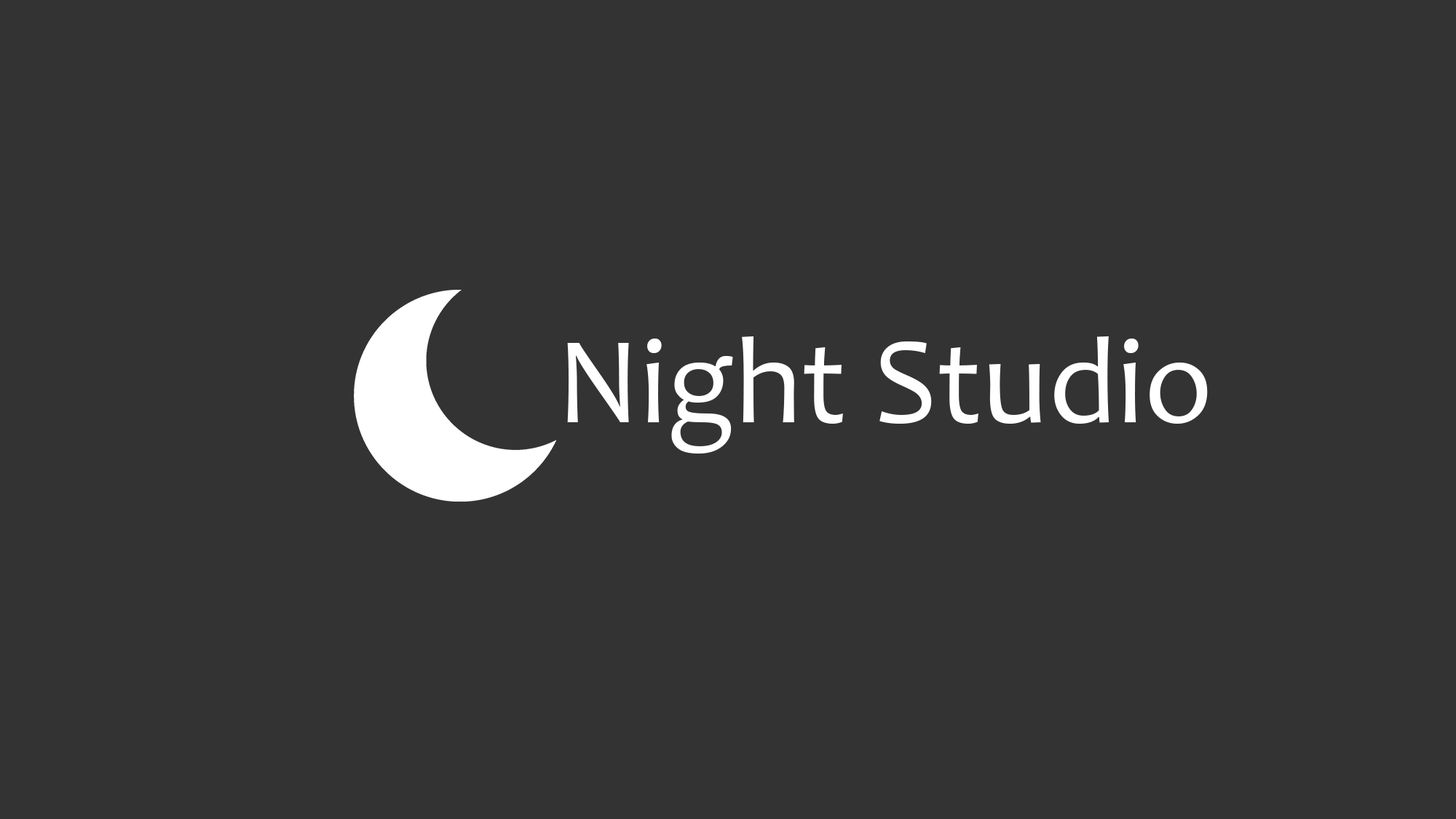
<style>
.page{position:relative;width:1456px;height:819px;background:#333333}
.page>*{position:absolute;margin:0}
.t1{font:124.4px "Candara";color:#ffffff}
</style>
<div class="page">
<p class="t1" style="left:567px;top:336px;width:641px;height:118px">Night Studio</p>
</div>
